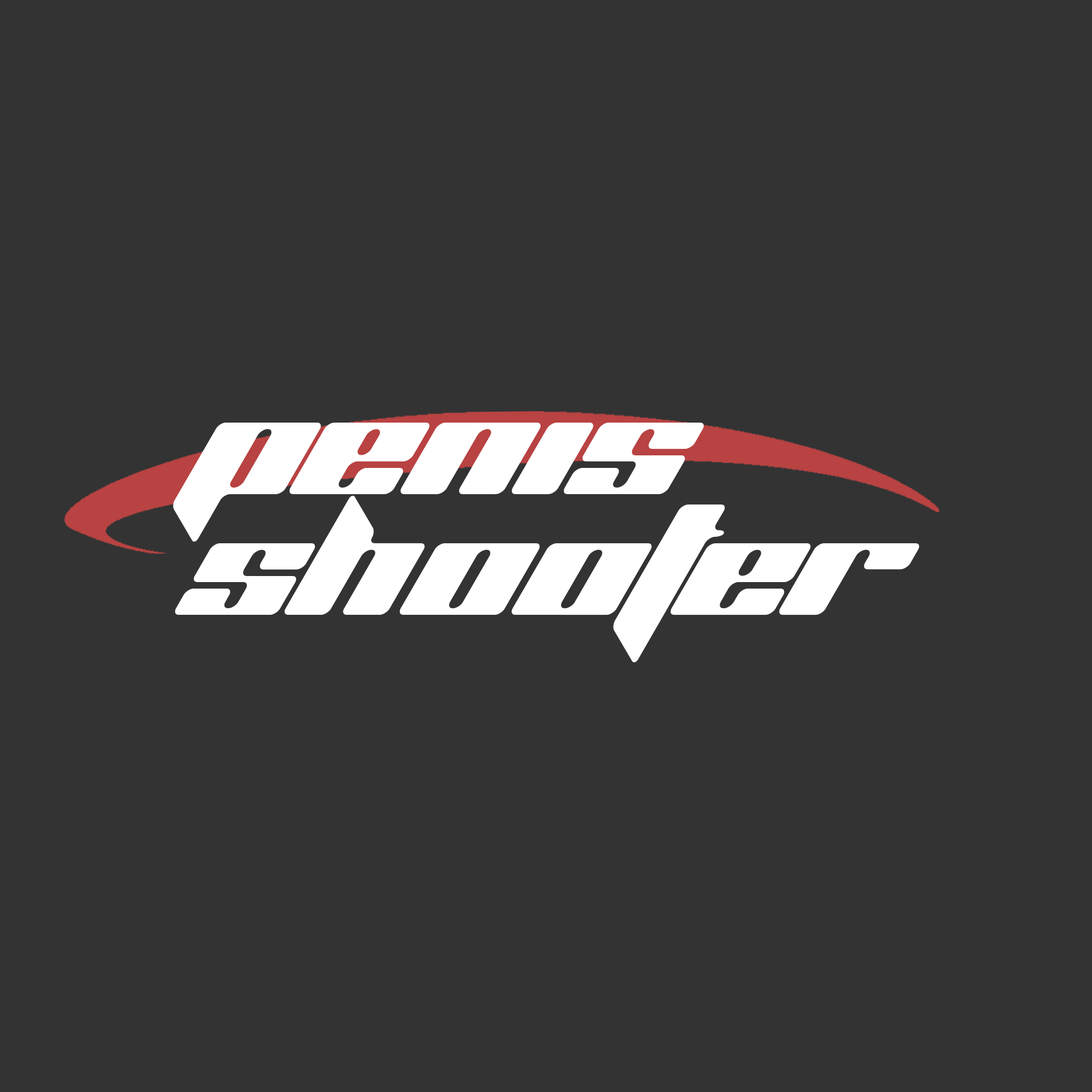
<style>
.page{position:relative;width:1092px;height:1092px;background:#333333}
.page>*{position:absolute;margin:0}
.t1{font:135.5px/120.6px "PlanetKosmos";color:#ffffff}
</style>
<div class="page">
<p class="t1" style="left:173px;top:423px;width:746px;height:239px">PENIS<br>SHOOTER</p>
</div>
